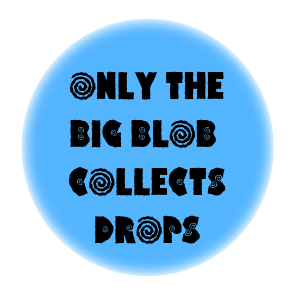
<style>
.page{position:relative;width:300px;height:300px;background:#ffffff}
.page>*{position:absolute;margin:0}
.t1{font:40px "HippoCritic";color:#000000}
</style>
<div class="page">
<p class="t1" style="left:69px;top:71px;width:157px;height:173px;text-align:center">ONLY THE<br>BIG BLOB <br>COLLECTS<br>DROPS</p>
</div>
